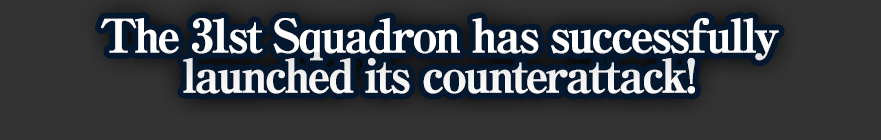
<style>
.page{position:relative;width:881px;height:140px;background:#333333}
.page>*{position:absolute;margin:0}
.t1{font:46px/40px "RyuminPro-ExBold";letter-spacing:-0.08em;color:#ffffff;font-weight:bold}
</style>
<div class="page">
<p class="t1" style="left:101px;top:18px;width:678px;height:76px;text-align:center">The 31st Squadron has successfully<br>launched its counterattack!</p>
</div>
